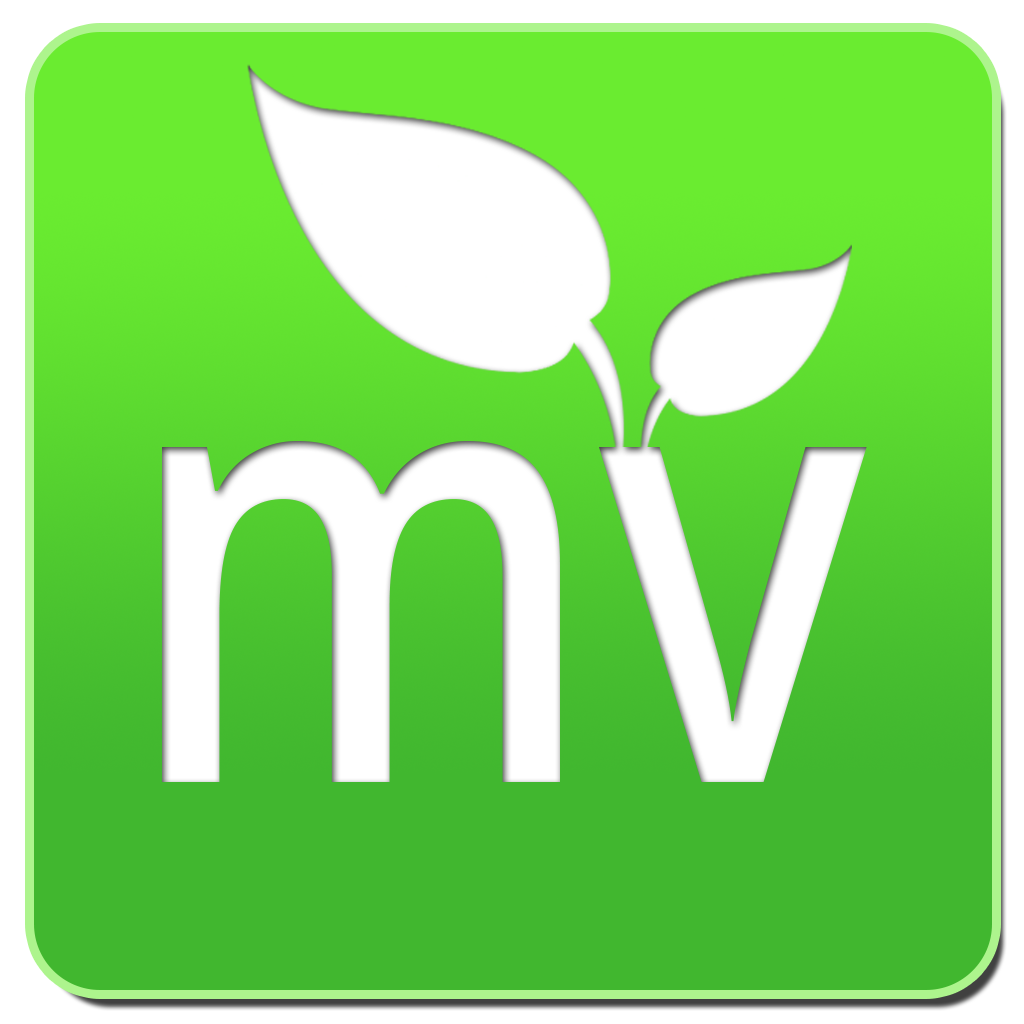
<style>
.page{position:relative;width:1024px;height:1024px;background:#ffffff}
.page>*{position:absolute;margin:0}
.t1{font:620px "OpenSans-Semibold";color:#ffffff;scale:0.81 1}
</style>
<div class="page">
<p class="t1" style="left:162px;top:441px;width:705px;height:341px">mv</p>
</div>
